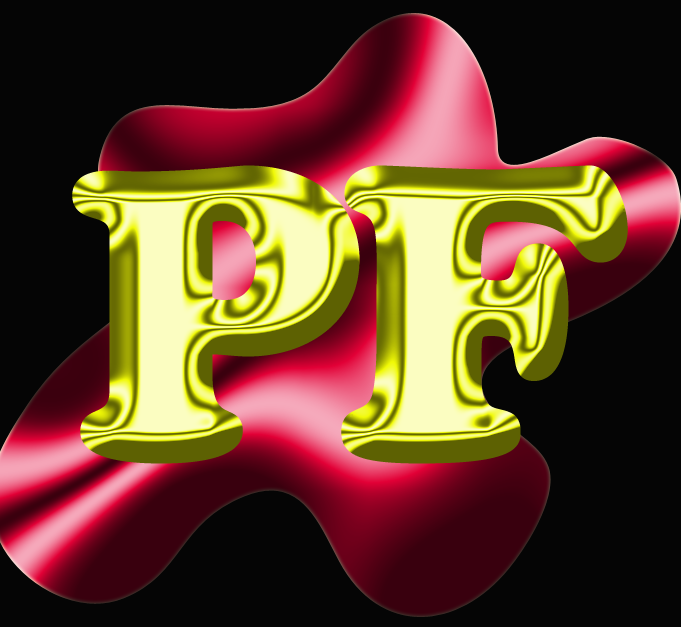
<style>
.page{position:relative;width:681px;height:627px;background:#050505}
.page>*{position:absolute;margin:0}
.t1{font:400px "CooperBlackStd";letter-spacing:-0.075em;text-transform:uppercase;font-weight:bold}
</style>
<div class="page">
<p class="t1" style="left:72px;top:165px;width:556px;height:299px">PF</p>
</div>
